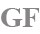
<style>
.page{position:relative;width:40px;height:34px;background:#ffffff}
.page>*{position:absolute;margin:0}
.t1{font:28.3px "TimesNewRomanPS-BoldMT";color:#878484}
</style>
<div class="page">
<p class="t1" style="left:1px;top:8px;width:38px;height:19px">GF</p>
</div>
